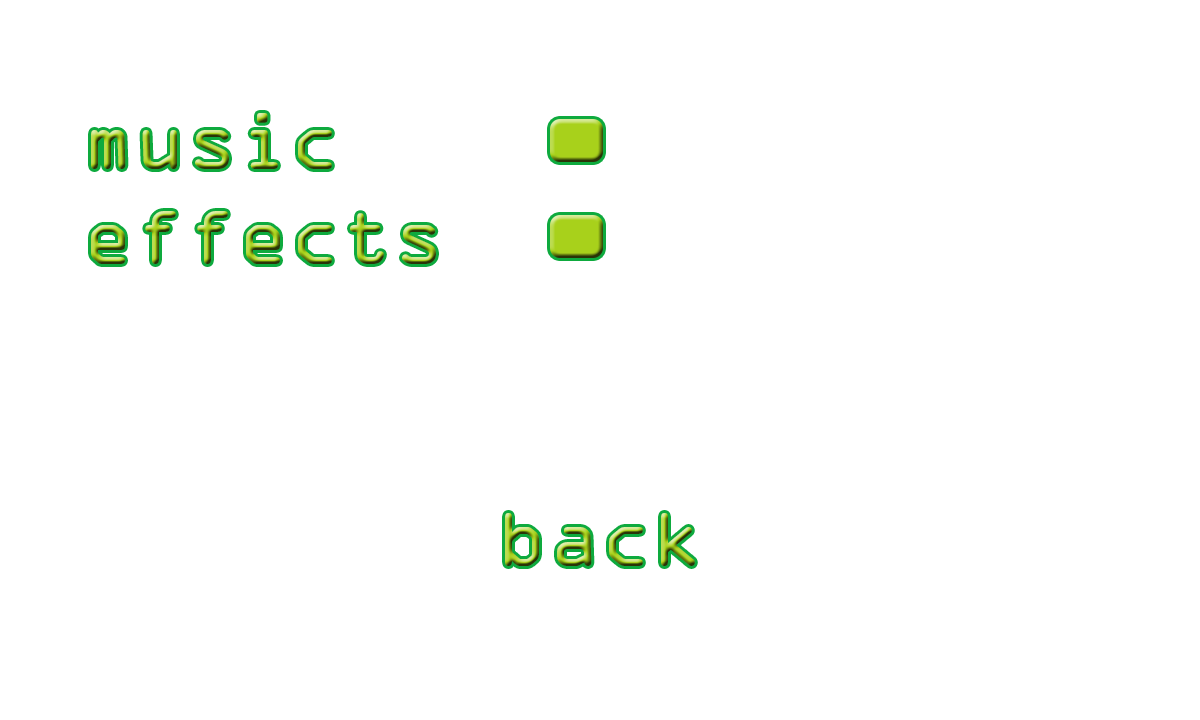
<style>
.page{position:relative;width:1200px;height:720px;background:#ffffff}
.page>*{position:absolute;margin:0}
.t1{font:72px "OCRAStd"}
</style>
<div class="page">
<p class="t1" style="left:91px;top:113px;width:241px;height:56px">music</p>
<p class="t1" style="left:91px;top:211px;width:345px;height:53px">effects</p>
<p class="t1" style="left:505px;top:513px;width:190px;height:53px">back</p>
</div>
